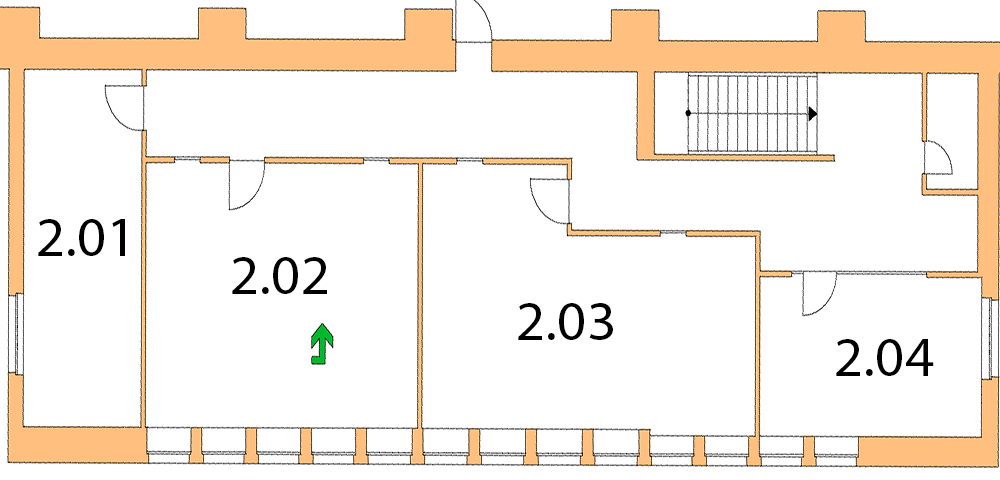
<style>
.page{position:relative;width:1000px;height:480px;background:#ffffff}
.page>*{position:absolute;margin:0}
.t1{font:55.5px "MyriadPro-Regular";color:#000000;scale:1.03 1}
</style>
<div class="page">
<p class="t1" style="left:38px;top:219px;width:87px;height:37px">2.01</p>
<p class="t1" style="left:232px;top:257px;width:95px;height:37px">2.02</p>
<p class="t1" style="left:518px;top:303px;width:95px;height:37px">2.03</p>
<p class="t1" style="left:836px;top:339px;width:98px;height:37px">2.04</p>
</div>
